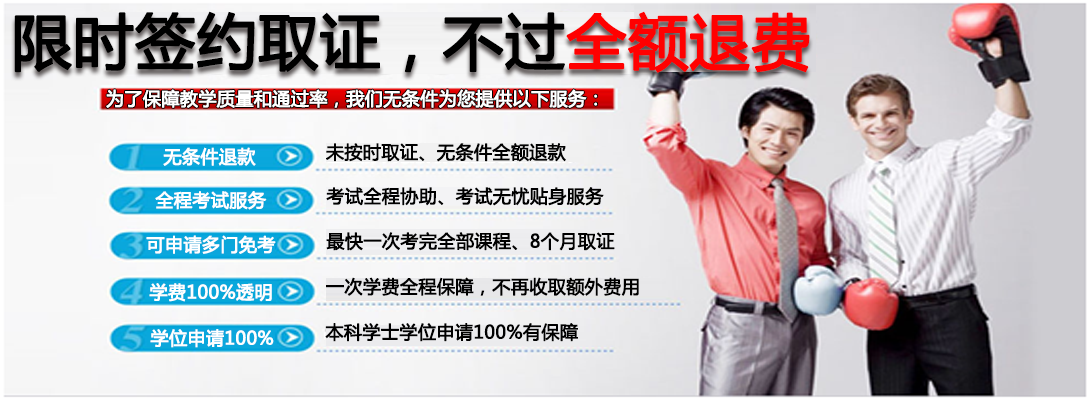
<style>
.page{position:relative;width:1090px;height:400px}
.page>*{position:absolute;margin:0}
.t1{font:60px "MicrosoftYaHei";color:#000000;font-weight:bold}
.t2{font:60px "MicrosoftYaHei";color:#ff0000;font-weight:bold}
.t3{font:18px "MicrosoftYaHei";color:#ffffff;font-weight:bold}
.t4{font:18px "MicrosoftYaHei";color:#010101;font-weight:bold}
.t5{font:18px "MicrosoftYaHei";color:#000000;font-weight:bold}
</style>
<div class="page">
<p class="t1" style="left:14px;top:11px;width:796px;height:62px">限时签约取证，不过<span class="t2">全额退费</span></p>
<p class="t3" style="left:106px;top:89px;width:492px;height:19px">为了保障教学质量和通过率，我们无条件为您提供以下服务：</p>
<p class="t3" style="left:163px;top:147px;width:93px;height:19px">无条件退款</p>
<p class="t4" style="left:326px;top:143px;width:240px;height:19px">未按时取证、无条件全额退款</p>
<p class="t3" style="left:155px;top:191px;width:112px;height:19px">全程考试服务</p>
<p class="t5" style="left:326px;top:187px;width:278px;height:19px">考试全程协助、考试无忧贴身服务</p>
<p class="t5" style="left:326px;top:232px;width:289px;height:19px">最快一次考完全部课程、8个月取证</p>
<p class="t3" style="left:146px;top:235px;width:130px;height:19px">可申请多门免考</p>
<p class="t5" style="left:326px;top:277px;width:313px;height:19px">一次学费全程保障，不再收取额外费用</p>
<p class="t3" style="left:149px;top:283px;width:123px;height:19px">学费100%透明</p>
<p class="t3" style="left:150px;top:329px;width:124px;height:19px">学位申请100%</p>
<p class="t5" style="left:325px;top:323px;width:253px;height:19px">本科学士学位申请100%有保障</p>
</div>
